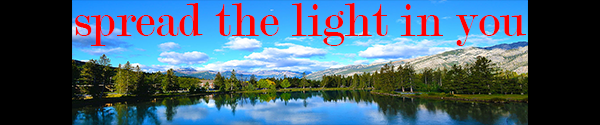
<style>
.page{position:relative;width:600px;height:125px;background:#000000}
.page>*{position:absolute;margin:0}
.t1{font:12px "Modern-Regular";color:#ff0000}
</style>
<div class="page">
<p class="t1" style="left:75px;top:3px;width:451px;height:43px">spread the light in you</p>
</div>
